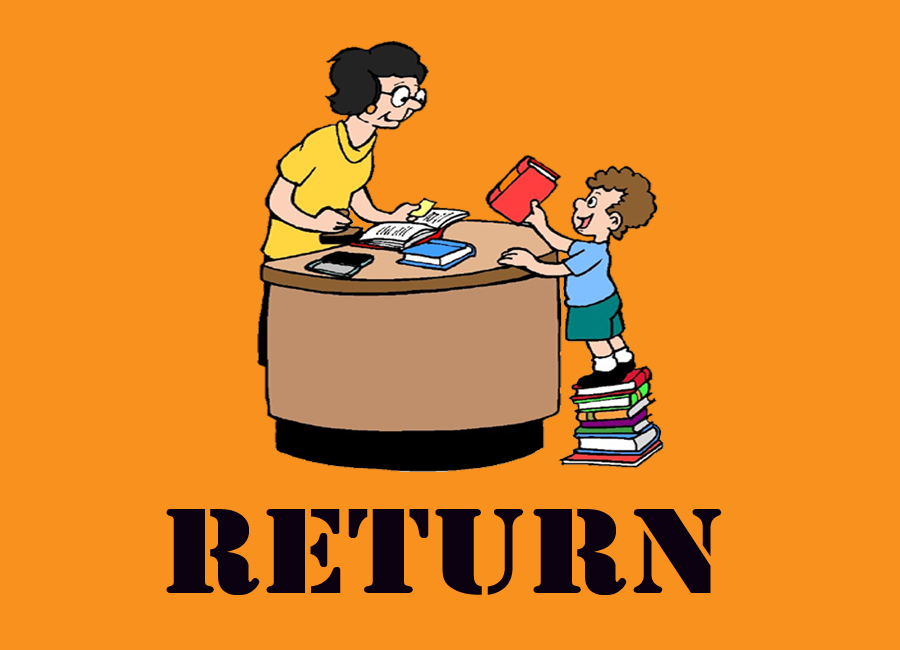
<style>
.page{position:relative;width:900px;height:650px;background:#f9911e}
.page>*{position:absolute;margin:0}
.t1{font:125.9px "Stencil";color:#0c0111;scale:1.14 1}
</style>
<div class="page">
<p class="t1" style="left:166px;top:509px;width:556px;height:86px">RETURN</p>
</div>
